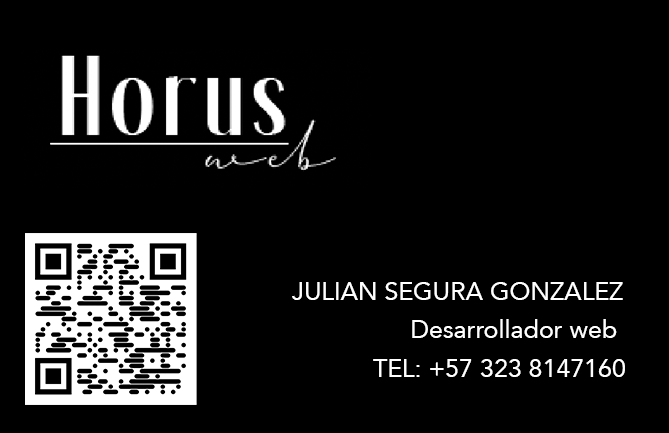
<style>
.page{position:relative;width:669px;height:433px;background:#000000}
.page>*{position:absolute;margin:0}
.t1{font:25px "Avenir-Roman";color:#ffffff}
</style>
<div class="page">
<p class="t1" style="left:292px;top:282px;width:331px;height:18px">JULIAN SEGURA GONZALEZ</p>
<p class="t1" style="left:412px;top:319px;width:205px;height:19px">Desarrollador web</p>
<p class="t1" style="left:373px;top:359px;width:252px;height:18px">TEL: +57 323 8147160</p>
</div>
